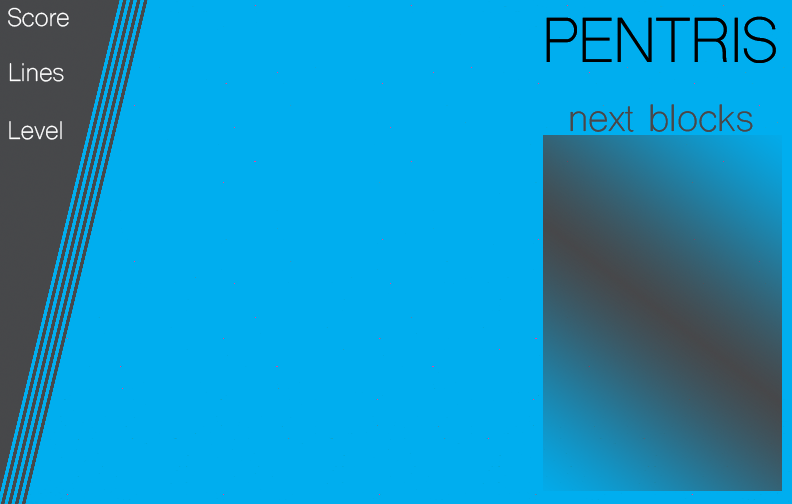
<style>
.page{position:relative;width:792px;height:504px;background:#00aeef}
.page>*{position:absolute;margin:0}
.t1{font:24px "ShreeDev0714";color:#ffffff}
.t2{font:60px "ShreeDev0714";color:#000000}
.t3{font:36px "ShreeDev0714";color:#47484a}
</style>
<div class="page">
<p class="t1" style="left:8px;top:7px;width:61px;height:20px">Score</p>
<p class="t2" style="left:546px;top:16px;width:230px;height:47px">PENTRIS</p>
<p class="t1" style="left:9px;top:63px;width:55px;height:19px">Lines</p>
<p class="t3" style="left:570px;top:104px;width:183px;height:28px">next blocks</p>
<p class="t1" style="left:9px;top:121px;width:53px;height:19px">Level</p>
</div>
